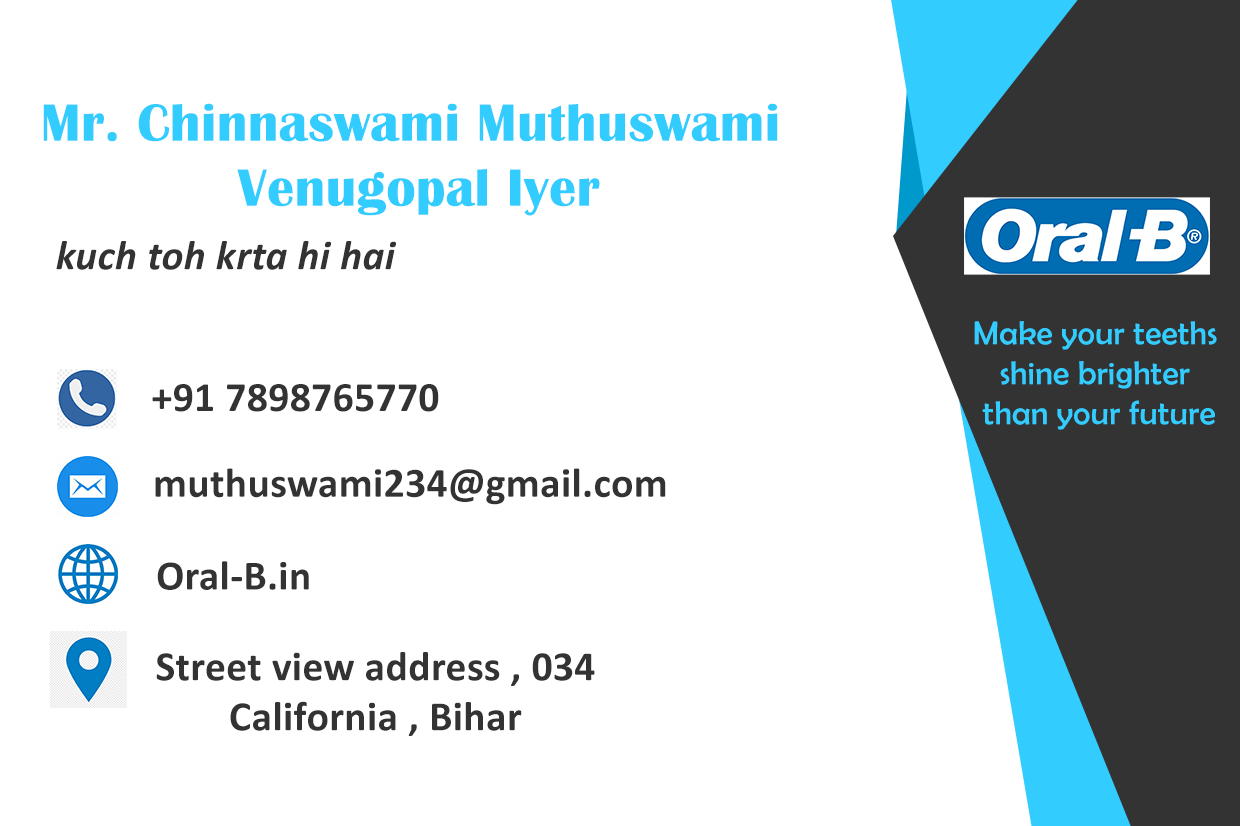
<style>
.page{position:relative;width:1240px;height:826px;background:#ffffff}
.page>*{position:absolute;margin:0}
.t1{font:54.2px "BritannicBold";letter-spacing:0.008em;color:#33ccff}
.t2{font:41.7px "Calibri-BoldItalic";letter-spacing:0.008em;color:#333333}
.t3{font:33.3px "BerlinSansFB-Reg";letter-spacing:0.008em;color:#33ccff}
.t4{font:41.7px "Calibri-Bold";letter-spacing:0.008em;color:#333333}
</style>
<div class="page">
<p class="t1" style="left:43px;top:103px;width:735px;height:113px;text-align:center">Mr. Chinnaswami Muthuswami<br> Venugopal Iyer</p>
<p class="t2" style="left:56px;top:241px;width:340px;height:29px">kuch toh krta hi hai</p>
<p class="t3" style="left:974px;top:321px;width:243px;height:109px;text-align:center">Make your teeths <br>shine brighter <br>than your future</p>
<p class="t4" style="left:152px;top:384px;width:287px;height:28px">+91 7898765770</p>
<p class="t4" style="left:155px;top:468px;width:511px;height:37px">muthuswami234@gmail.com</p>
<p class="t4" style="left:157px;top:561px;width:152px;height:29px">Oral-B.in</p>
<p class="t4" style="left:156px;top:652px;width:439px;height:84px;text-align:center">Street view address , 034<br>California , Bihar</p>
</div>
